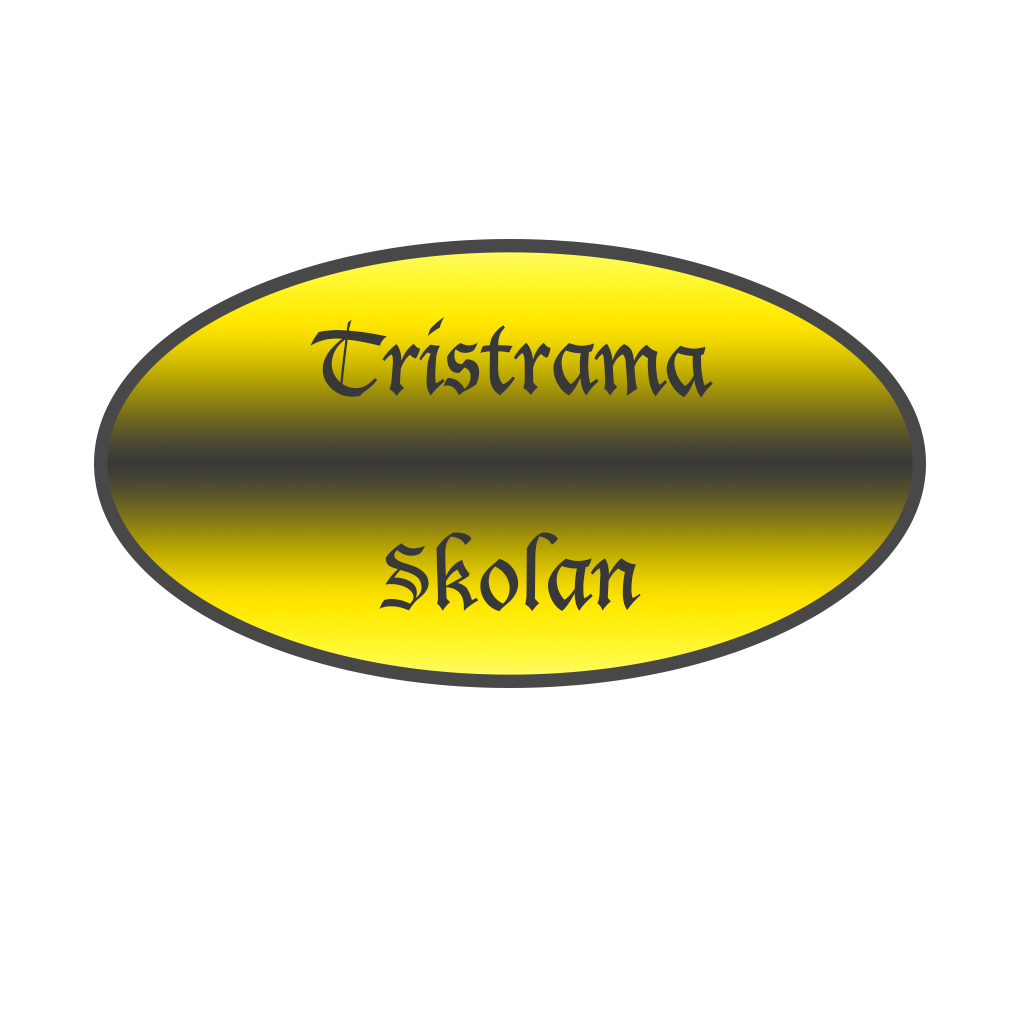
<style>
.page{position:relative;width:1024px;height:1024px;background:#ffffff}
.page>*{position:absolute;margin:0}
.t1{font:72px "LucidaBlackletter";color:#383838}
</style>
<div class="page">
<p class="t1" style="left:310px;top:317px;width:403px;height:295px;text-align:center">Tristrama<br><br>Skolan</p>
</div>
